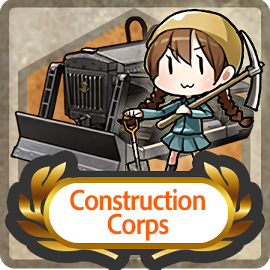
<style>
.page{position:relative;width:270px;height:270px}
.page>*{position:absolute;margin:0}
.t1{font:30px/24px "AdobeClean-Bold";letter-spacing:-0.04em;color:#ff5d00;scale:0.9 1}
</style>
<div class="page">
<p class="t1" style="left:70px;top:188px;width:135px;height:53px;text-align:center">Construction<br>Corps</p>
</div>
